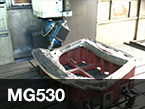
<style>
.page{position:relative;width:145px;height:109px}
.page>*{position:absolute;margin:0}
.t1{font:17.3px "HelveticaNeue-Bold";color:#ffffff}
</style>
<div class="page">
<p class="t1" style="left:8px;top:88px;width:57px;height:14px">MG530</p>
<p class="t1" style="left:8px;top:88px;width:57px;height:14px">MG530</p>
</div>
